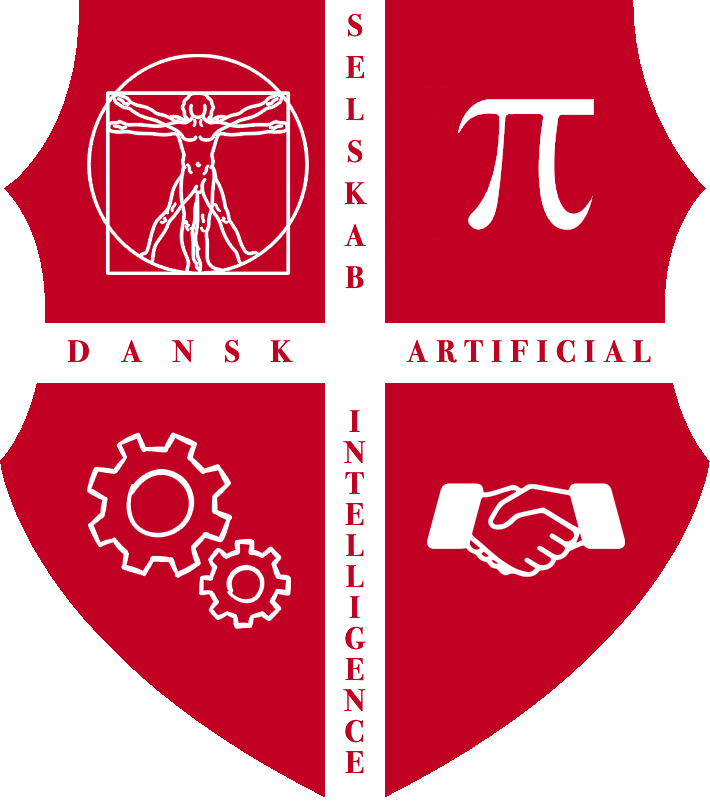
<style>
.page{position:relative;width:710px;height:812px;background:#c10023}
.page>*{position:absolute;margin:0}
.t1{font:31px/42px "BodoniSvtyTwoITCTT-Bold";color:#c10023}
.t2{font:31px "BodoniSvtyTwoITCTT-Bold";letter-spacing:1em;color:#c10023}
.t3{font:31px "BodoniSvtyTwoITCTT-Bold";letter-spacing:0.28em;color:#c10023}
.t4{font:31px/31px "BodoniSvtyTwoITCTT-Bold";letter-spacing:0.2em;color:#c10023}
</style>
<div class="page">
<p class="t1" style="left:344px;top:13px;width:23px;height:276px;text-align:center">S<br>E<br>L<br>S<br>K<br>A<br>B</p>
<p class="t2" style="left:67px;top:339px;width:226px;height:24px">DANSK</p>
<p class="t3" style="left:406px;top:339px;width:245px;height:24px">ARTIFICIAL</p>
<p class="t4" style="left:343px;top:410px;width:23px;height:364px;text-align:center">I<br>N<br>T<br>E<br>L<br>L<br>I<br>G<br>E<br>N<br>C<br>E</p>
</div>
